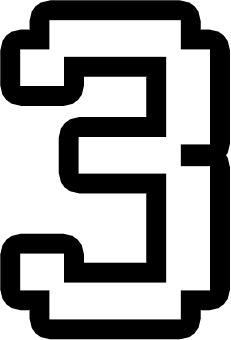
<style>
.page{position:relative;width:231px;height:340px;background:#ffffff}
.page>*{position:absolute;margin:0}
.t1{font:466.7px "Courier";color:#ffffff;font-weight:bold}
</style>
<div class="page">
<p class="t1" style="left:20px;top:20px;width:190px;height:300px">3</p>
</div>
